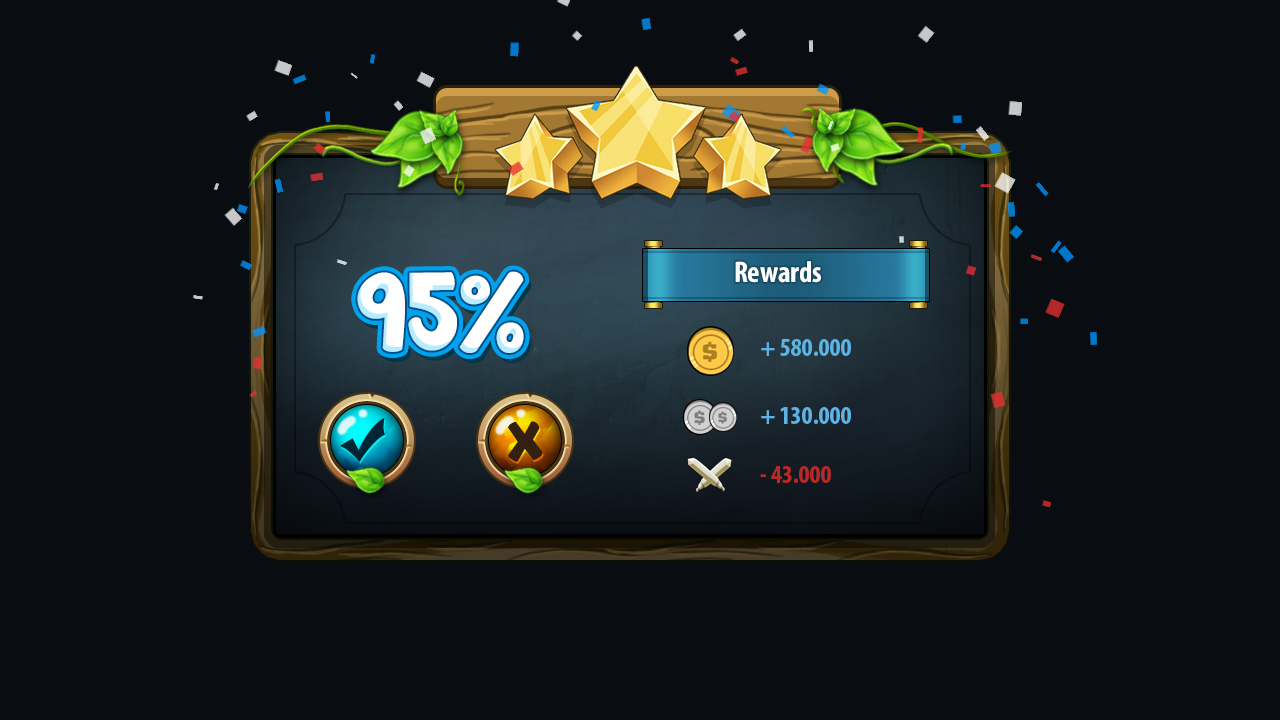
<style>
.page{position:relative;width:1280px;height:720px;background:#090d12}
.page>*{position:absolute;margin:0}
.t1{font:30px "MyriadPro-BoldCond";color:#ffffff}
.t2{font:98.9px "JandaManateeSolid";color:#ffffff}
.t3{font:26px "MyriadPro-BoldCond";color:#5db3e3}
.t4{font:26px "MyriadPro-BoldCond";color:#b82a29}
</style>
<div class="page">
<p class="t1" style="left:735px;top:261px;width:86px;height:22px">Rewards</p>
<p class="t2" style="left:357px;top:271px;width:167px;height:82px">95%</p>
<p class="t3" style="left:761px;top:339px;width:90px;height:17px">+ 580.000</p>
<p class="t3" style="left:761px;top:407px;width:90px;height:17px">+ 130.000</p>
<p class="t4" style="left:760px;top:466px;width:71px;height:17px">- 43.000</p>
</div>
